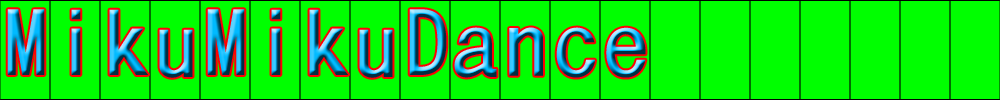
<style>
.page{position:relative;width:1000px;height:100px;background:#00ff00}
.page>*{position:absolute;margin:0}
.t1{font:100px "JSPGothic-Md"}
</style>
<div class="page">
<p class="t1" style="left:7px;top:9px;width:639px;height:69px">MikuMikuDance</p>
</div>
